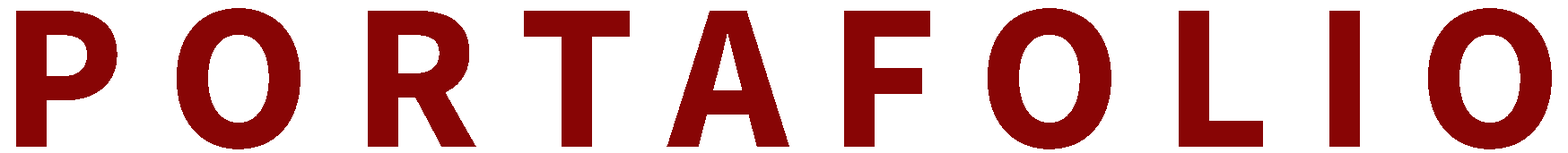
<style>
.page{position:relative;width:1568px;height:153px;background:#ffffff}
.page>*{position:absolute;margin:0}
.t1{font:209.3px "SourceSansRoman-Bold";letter-spacing:0.2em;color:#880505}
</style>
<div class="page">
<p class="t1" style="left:16px;top:8px;width:1536px;height:142px">PORTAFOLIO</p>
</div>
